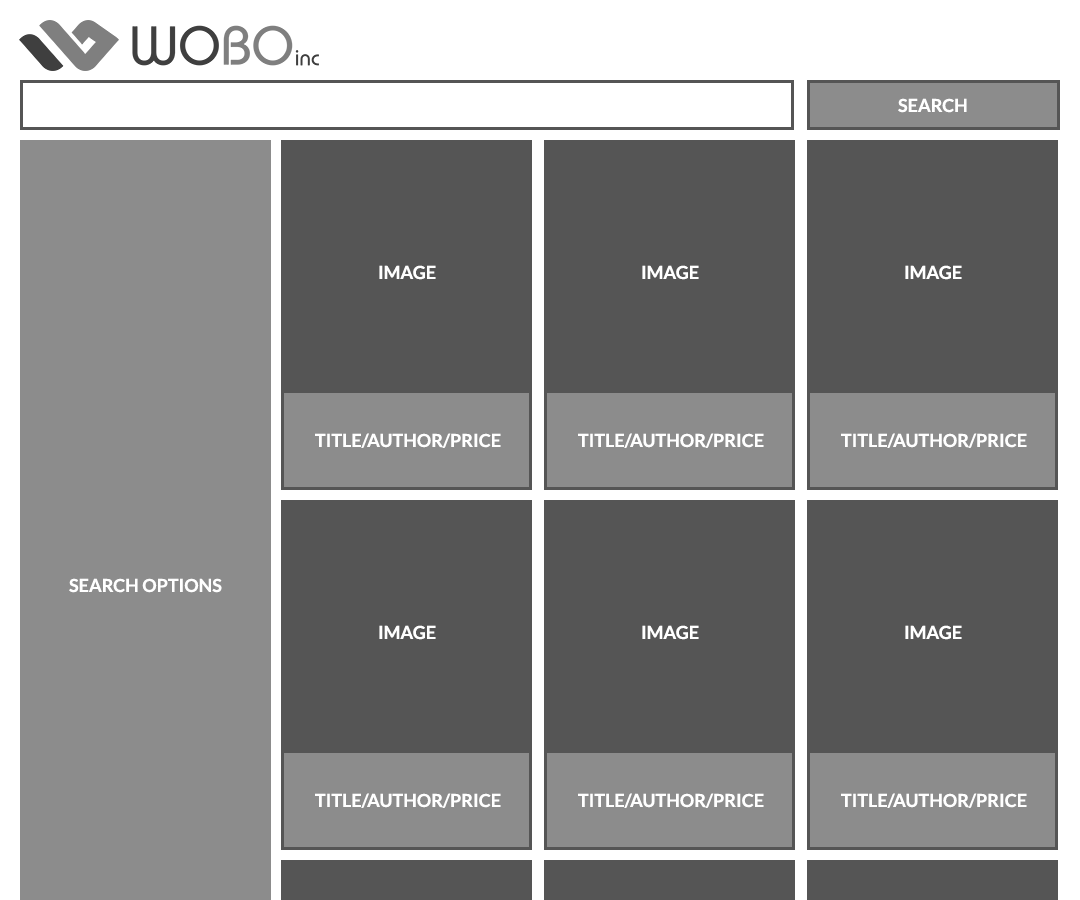
<style>
.page{position:relative;width:1080px;height:900px;background:#555555}
.page>*{position:absolute;margin:0}
.t1{font:18px "Lato-Bold";color:#ffffff}
</style>
<div class="page">
<p class="t1" style="left:898px;top:98px;width:69px;height:15px">SEARCH</p>
<p class="t1" style="left:379px;top:265px;width:57px;height:15px">IMAGE</p>
<p class="t1" style="left:642px;top:265px;width:57px;height:15px">IMAGE</p>
<p class="t1" style="left:905px;top:265px;width:57px;height:15px">IMAGE</p>
<p class="t1" style="left:315px;top:433px;width:186px;height:15px">TITLE/AUTHOR/PRICE</p>
<p class="t1" style="left:578px;top:433px;width:186px;height:15px">TITLE/AUTHOR/PRICE</p>
<p class="t1" style="left:841px;top:433px;width:186px;height:15px">TITLE/AUTHOR/PRICE</p>
<p class="t1" style="left:69px;top:578px;width:153px;height:15px">SEARCH OPTIONS</p>
<p class="t1" style="left:379px;top:625px;width:57px;height:15px">IMAGE</p>
<p class="t1" style="left:642px;top:625px;width:57px;height:15px">IMAGE</p>
<p class="t1" style="left:905px;top:625px;width:57px;height:15px">IMAGE</p>
<p class="t1" style="left:315px;top:793px;width:186px;height:15px">TITLE/AUTHOR/PRICE</p>
<p class="t1" style="left:578px;top:793px;width:186px;height:15px">TITLE/AUTHOR/PRICE</p>
<p class="t1" style="left:841px;top:793px;width:186px;height:15px">TITLE/AUTHOR/PRICE</p>
</div>
